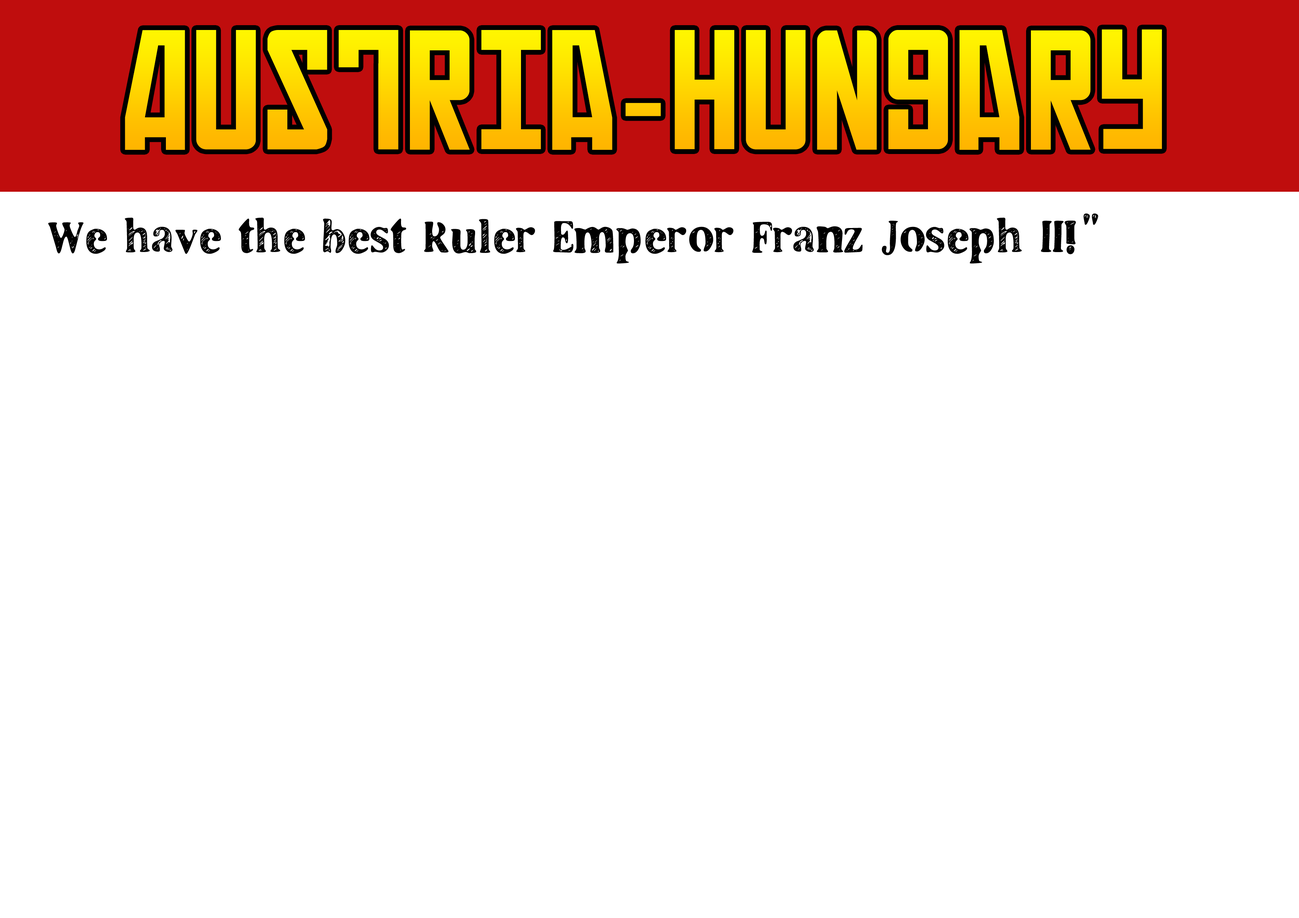
<style>
.page{position:relative;width:1299px;height:918px;background:#ffffff}
.page>*{position:absolute;margin:0}
.t1{font:142.7px "Russian";letter-spacing:0.025em}
.t2{font:142.7px "Helvetica";letter-spacing:0.025em}
.t3{font:46.3px "LLCooper";letter-spacing:0.025em;color:#000000}
</style>
<div class="page">
<p class="t1" style="left:125px;top:29px;width:1037px;height:121px">Austria<span class="t2">-</span>Hungary</p>
<p class="t3" style="left:48px;top:213px;width:1050px;height:51px">We have the best Ruler Emperor Franz Joseph II!”</p>
</div>
